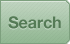
<style>
.page{position:relative;width:70px;height:44px}
.page>*{position:absolute;margin:0}
.t1{font:16.4px "HelveticaNeue-Bold";color:#557b56}
</style>
<div class="page">
<p class="t1" style="left:8px;top:16px;width:53px;height:13px">Search</p>
</div>
